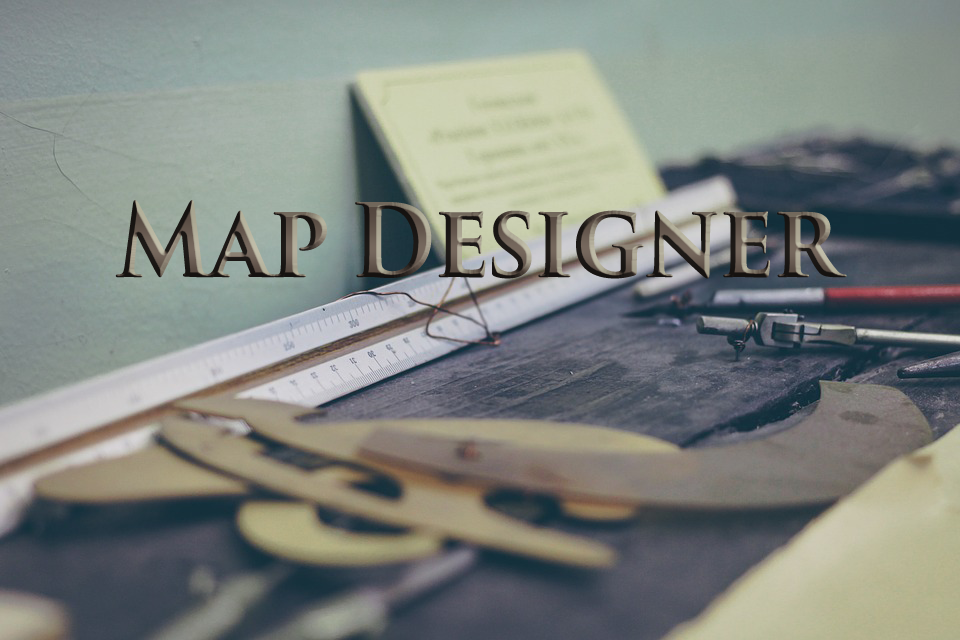
<style>
.page{position:relative;width:960px;height:640px}
.page>*{position:absolute;margin:0}
.t1{font:98.7px "TrajanPro3-Bold";letter-spacing:-0.05em;font-weight:bold;scale:0.91 1}
</style>
<div class="page">
<p class="t1" style="left:115px;top:200px;width:732px;height:79px">Map Designer</p>
</div>
